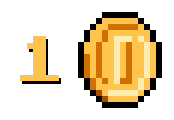
<style>
.page{position:relative;width:174px;height:120px;background:#ffffff}
.page>*{position:absolute;margin:0}
.t1{font:90px "ArcadeClassic";letter-spacing:-0.05em;color:#ffc44d}
</style>
<div class="page">
<p class="t1" style="left:20px;top:36px;width:39px;height:45px">1</p>
</div>
